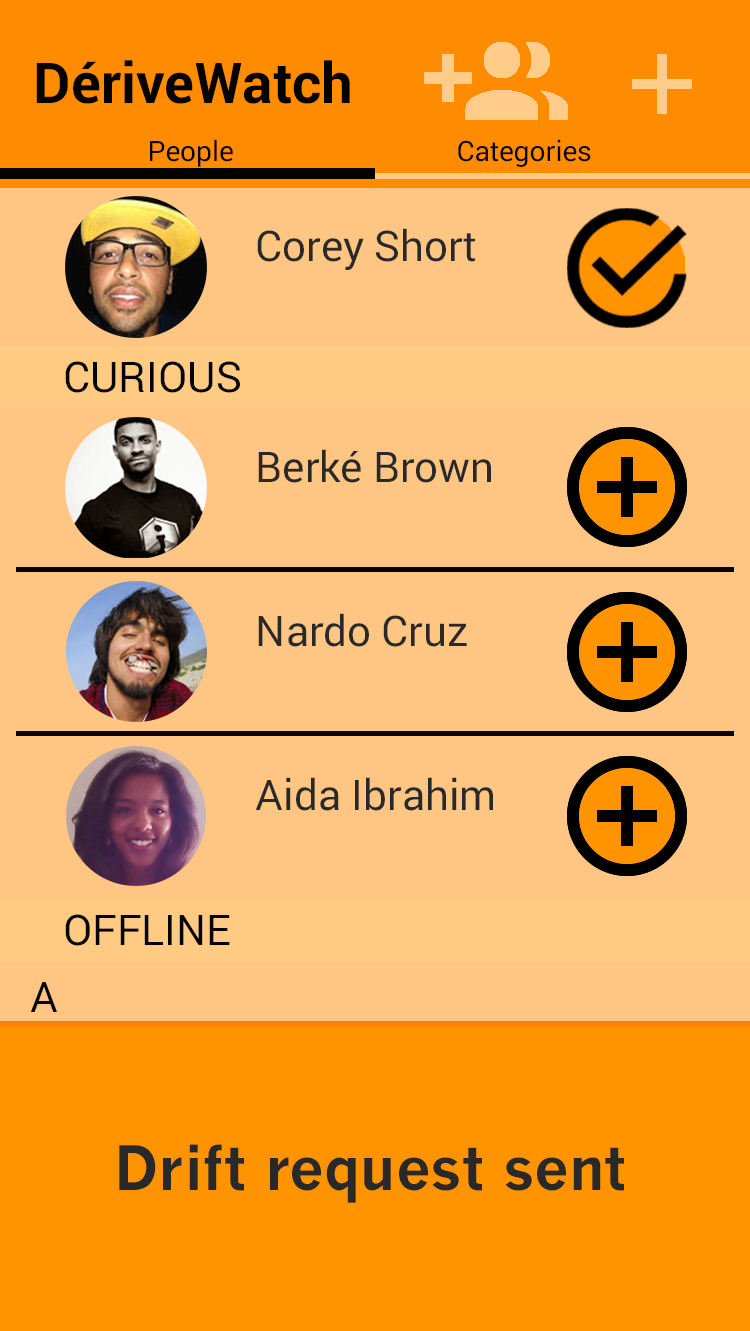
<style>
.page{position:relative;width:750px;height:1331px;background:#ffc683}
.page>*{position:absolute;margin:0}
.t1{font:56.2px "Roboto-Bold";color:#050300}
.t2{font:28.1px "Roboto-Black";color:#050300}
.t3{font:42.2px "Roboto-Black";color:#292929}
.t4{font:42.2px "Roboto-Black";color:#050300}
.t5{font:60px "NewsGothicMT-Bold";color:#292929}
</style>
<div class="page">
<p class="t1" style="left:36px;top:60px;width:314px;height:44px">DériveWatch</p>
<p class="t2" style="left:150px;top:139px;width:83px;height:28px">People</p>
<p class="t2" style="left:458px;top:139px;width:133px;height:28px">Categories</p>
<p class="t3" style="left:257px;top:228px;width:219px;height:42px">Corey Short</p>
<p class="t4" style="left:65px;top:361px;width:175px;height:32px">CURIOUS</p>
<p class="t3" style="left:258px;top:449px;width:233px;height:34px">Berké Brown</p>
<p class="t3" style="left:258px;top:613px;width:209px;height:34px">Nardo Cruz</p>
<p class="t3" style="left:255px;top:777px;width:238px;height:34px">Aida Ibrahim</p>
<p class="t4" style="left:65px;top:914px;width:165px;height:32px">OFFLINE</p>
<p class="t4" style="left:30px;top:982px;width:27px;height:30px">A</p>
<p class="t5" style="left:119px;top:1144px;width:505px;height:59px">Drift request sent</p>
</div>
